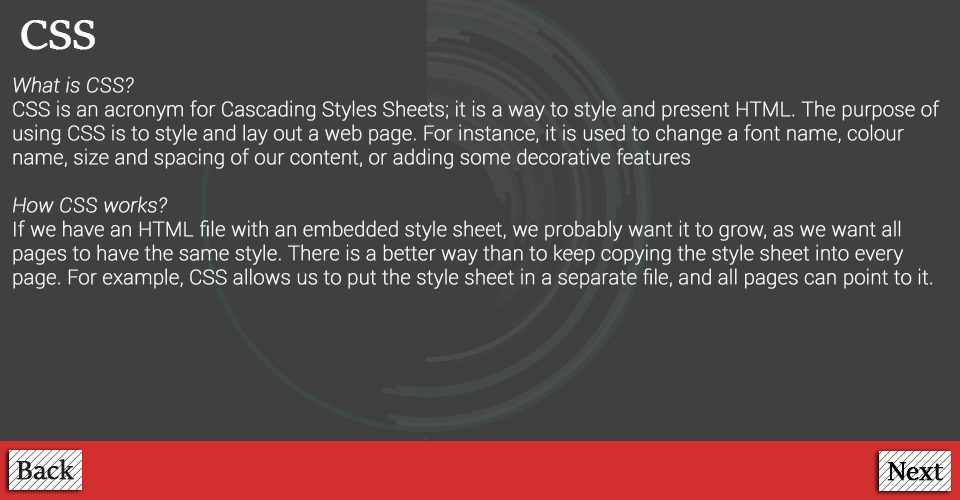
<style>
.page{position:relative;width:960px;height:500px;background:#404042}
.page>*{position:absolute;margin:0}
.t1{font:48px "SitkaBanner";color:#ffffff;font-weight:bold}
.t2{font:20px "Roboto-Thin";color:#ffffff;font-weight:bold}
.t3{font:20px "Roboto-ThinItalic";color:#ffffff;font-weight:bold}
.t4{font:30px "SitkaBanner";color:#1e1e1e;font-weight:bold}
.t5{font:30px "SitkaBanner";color:#060606;font-weight:bold}
</style>
<div class="page">
<p class="t1" style="left:21px;top:20px;width:74px;height:30px">CSS</p>
<p class="t2" style="left:13px;top:76px;width:927px;height:213px"><span class="t3">What is CSS?<br></span>CSS is an acronym for Cascading Styles Sheets; it is a way to style and present HTML. The purpose of using CSS is to style and lay out a web page. For instance, it is used to change a font name, colour name, size and spacing of our content, or adding some decorative features<br><br><span class="t3">How CSS works?<br></span>If we have an HTML file with an embedded style sheet, we probably want it to grow, as we want all pages to have the same style. There is a better way than to keep copying the style sheet into every page. For example, CSS allows us to put the style sheet in a separate file, and all pages can point to it.</p>
<p class="t4" style="left:16px;top:459px;width:59px;height:21px">Back</p>
<p class="t5" style="left:887px;top:462px;width:57px;height:19px">Next</p>
</div>
